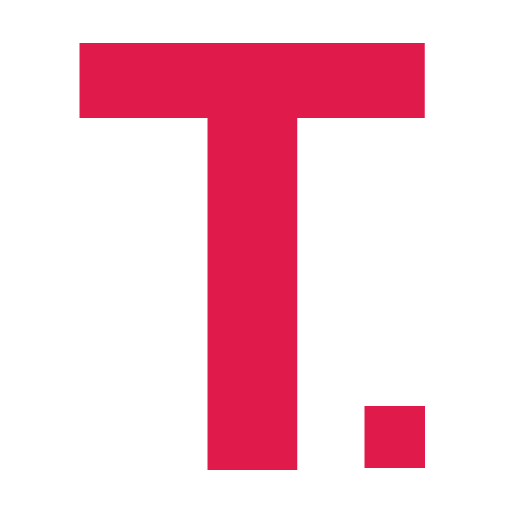
<style>
.page{position:relative;width:512px;height:512px;background:#ffffff}
.page>*{position:absolute;margin:0}
.t1{font:592px "Helvetica-Bold";color:#e01b4c}
.t2{font:592px "Helvetica";color:#e01b4c}
</style>
<div class="page">
<p class="t1" style="left:79px;top:43px;width:346px;height:427px">T</p>
<p class="t2" style="left:364px;top:406px;width:61px;height:62px">.</p>
</div>
